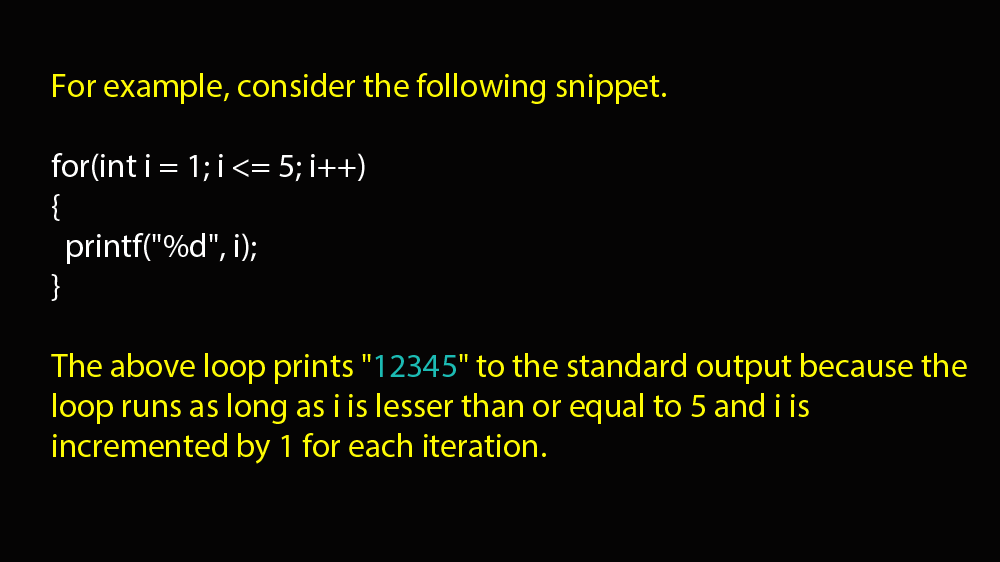
<style>
.page{position:relative;width:1000px;height:562px;background:#050404}
.page>*{position:absolute;margin:0}
.t1{font:33.3px "MyriadPro-Regular";color:#fefb04}
.t2{font:33.3px "MyriadPro-Regular";color:#ffffff}
.t3{font:33.3px "MyriadPro-Regular";color:#1cbbb4}
</style>
<div class="page">
<p class="t1" style="left:51px;top:73px;width:916px;height:391px">For example, consider the following snippet.<br><br><span class="t2">for(int i = 1; i &lt;= 5; i++)<br>{<br>  printf("%d", i);<br>}<br></span><br>The above loop prints "<span class="t3">12345</span>" to the standard output because the loop runs as long as i is lesser than or equal to 5 and i is incremented by 1 for each iteration.</p>
</div>
